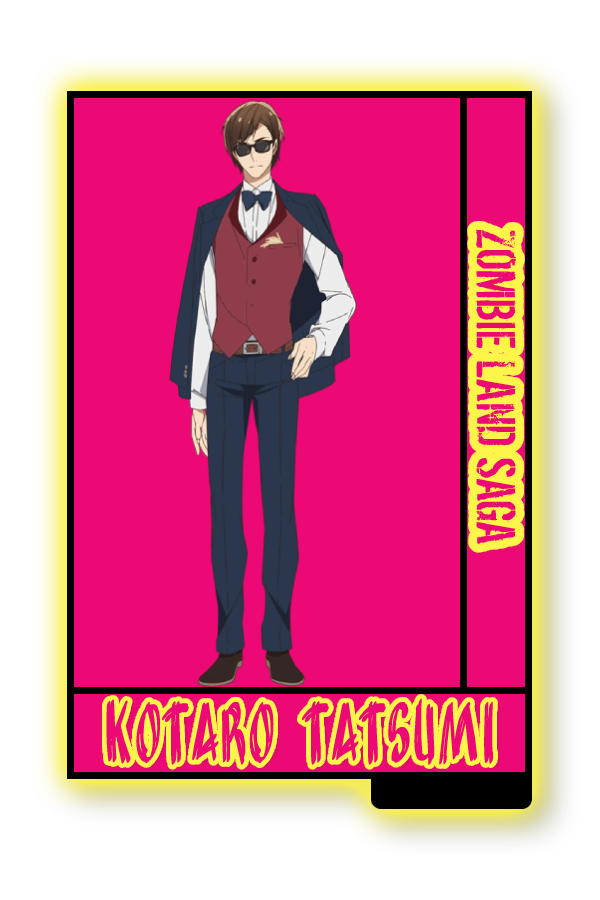
<style>
.page{position:relative;width:600px;height:900px;background:#ec0976}
.page>*{position:absolute;margin:0}
.t1{font:60.3px "DirtyEgo";color:#ec0976;scale:1.05 1}
.t2{font:72.2px "AnuDaw";color:#ec0976;scale:0.47 1}
</style>
<div class="page">
<p class="t1" style="left:476px;top:229px;width:41px;height:316px;rotate:90deg">ZOMBIE LAND SAGA</p>
<p class="t2" style="left:106px;top:698px;width:388px;height:68px">Kotaro Tatsumi</p>
</div>
